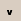
<style>
.page{position:relative;width:21px;height:21px;background:#d9cdc1}
.page>*{position:absolute;margin:0}
.t1{font:9px "Tahoma-Bold";color:#000000}
</style>
<div class="page">
<p class="t1" style="left:7px;top:10px;width:6px;height:5px">v</p>
</div>
